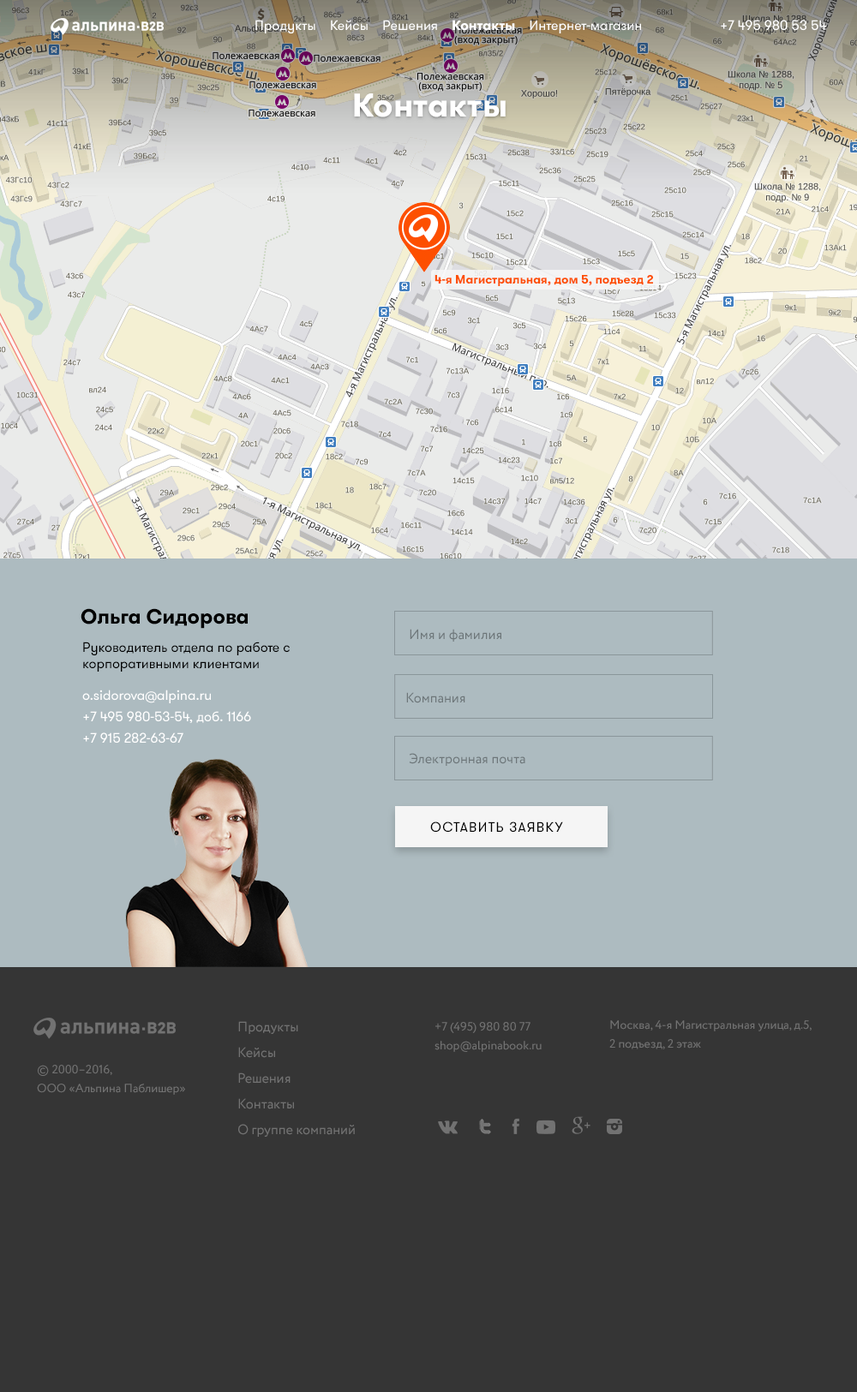
<style>
.page{position:relative;width:857px;height:1392px;background:#353535}
.page>*{position:absolute;margin:0}
.t1{font:13.7px "GTWalsheimProRegular";color:#ffffff}
.t2{font:13.7px "GTWalsheimProBold";color:#ffffff}
.t3{font:32.8px "GTWalsheimProBold";color:#ffffff}
.t4{font:12px "GTWalsheimProBold";color:#fd4f00}
.t5{font:20.6px "GTWalsheimProBold";color:#000000}
.t6{font:13.7px "Circe-Regular";color:#6d7679}
.t7{font:13.7px "GTWalsheimProRegular";color:#000000}
.t8{font:13.7px/21.4px "GTWalsheimProRegular";color:#ffffff}
.t9{font:13.7px "GTWalsheimProRegular";letter-spacing:0.08em;color:#000000;text-transform:uppercase}
.t10{font:13.7px/25.7px "Circe-Regular";color:#727272}
.t11{font:12px/18.8px "Circe-Regular";color:#727272}
</style>
<div class="page">
<p class="t1" style="left:255px;top:20px;width:386px;height:14px">Продукты    Кейсы    Решения    <span class="t2">Контакты</span>    Интернет-магазин</p>
<p class="t1" style="left:720px;top:20px;width:106px;height:11px">+7 495 980 53 54</p>
<p class="t3" style="left:354px;top:93px;width:151px;height:24px">Контакты</p>
<p class="t4" style="left:434px;top:275px;width:219px;height:11px">4-я Магистральная, дом 5, подъезд 2</p>
<p class="t5" style="left:81px;top:608px;width:167px;height:21px">Ольга Сидорова</p>
<p class="t6" style="left:409px;top:629px;width:92px;height:13px">Имя и фамилия</p>
<p class="t7" style="left:83px;top:642px;width:207px;height:30px">Руководитель отдела по работе с корпоративными клиентами</p>
<p class="t8" style="left:82px;top:690px;width:169px;height:54px">o.sidorova@alpina.ru<br>+7 495 980-53-54, доб. 1166<br>+7 915 282-63-67</p>
<p class="t6" style="left:406px;top:692px;width:59px;height:11px">Компания</p>
<p class="t6" style="left:409px;top:753px;width:116px;height:13px">Электронная почта</p>
<p class="t9" style="left:430px;top:822px;width:133px;height:11px">ОСТАВИТЬ ЗАЯВКУ</p>
<p class="t10" style="left:238px;top:1021px;width:117px;height:116px">Продукты<br>Кейсы<br>Решения<br>Контакты<br>О группе компаний</p>
<p class="t11" style="left:434px;top:1022px;width:107px;height:30px">+7 (495) 980 80 77<br>shop@alpinabook.ru</p>
<p class="t11" style="left:609px;top:1020px;width:202px;height:29px">Москва, 4-я Магистральная улица, д.5, 2 подъезд, 2 этаж</p>
<p class="t11" style="left:37px;top:1065px;width:148px;height:30px">© 2000–2016,<br>ООО «Альпина Паблишер»</p>
</div>
